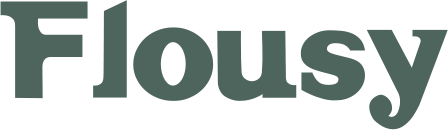
<style>
.page{position:relative;width:448px;height:130px;background:#ffffff}
.page>*{position:absolute;margin:0}
.t1{font:144px "Vintage";color:#4e655e}
</style>
<div class="page">
<p class="t1" style="left:0px;top:0px;width:448px;height:130px">Flousy</p>
</div>
